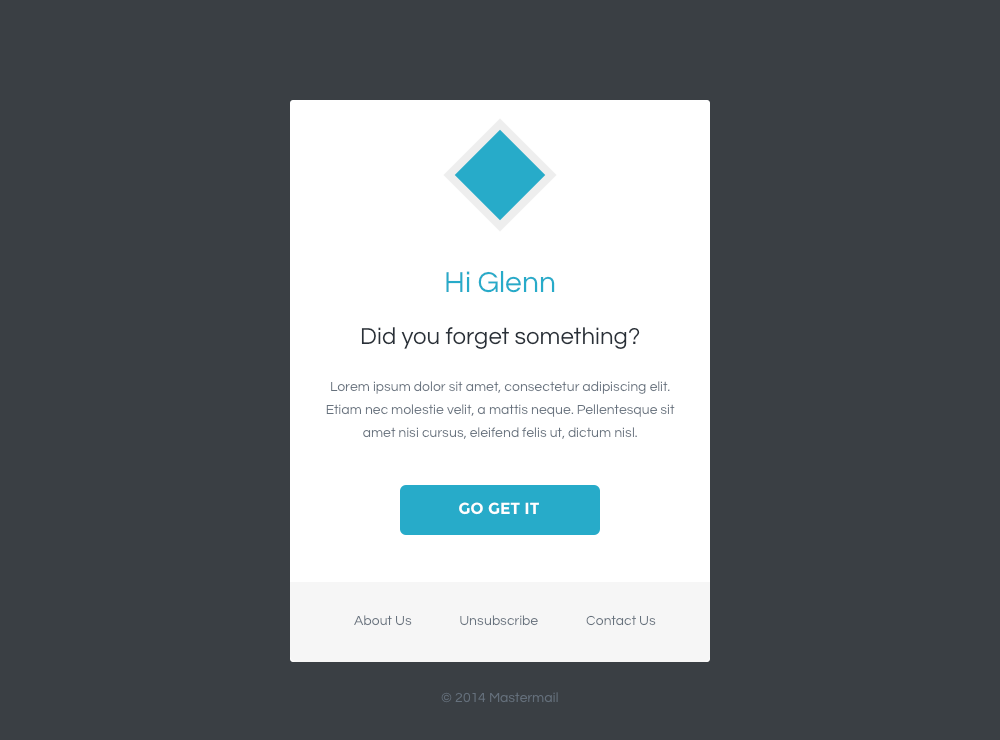
<style>
.page{position:relative;width:1000px;height:740px;background:#3a3f44}
.page>*{position:absolute;margin:0}
.t1{font:30px "Questrial-Regular";color:#27abc9}
.t2{font:24px "Questrial-Regular";color:#293038}
.t3{font:14px/23px "Questrial-Regular";color:#66717d}
.t4{font:16px "Montserrat-Bold";color:#ffffff;text-transform:uppercase}
.t5{font:14px "Questrial-Regular";color:#66717d}
</style>
<div class="page">
<p class="t1" style="left:446px;top:271px;width:109px;height:22px">Hi Glenn</p>
<p class="t2" style="left:361px;top:327px;width:279px;height:22px">Did you forget something?</p>
<p class="t3" style="left:326px;top:381px;width:349px;height:58px;text-align:center">Lorem ipsum dolor sit amet, consectetur adipiscing elit. Etiam nec molestie velit, a mattis neque. Pellentesque sit amet nisi cursus, eleifend felis ut, dictum nisl.</p>
<p class="t4" style="left:459px;top:502px;width:80px;height:13px">Go Get It</p>
<p class="t5" style="left:354px;top:615px;width:58px;height:11px">About Us</p>
<p class="t5" style="left:460px;top:615px;width:78px;height:11px">Unsubscribe</p>
<p class="t5" style="left:586px;top:615px;width:70px;height:11px">Contact Us</p>
<p class="t5" style="left:441px;top:692px;width:117px;height:11px">© 2014 Mastermail</p>
</div>
